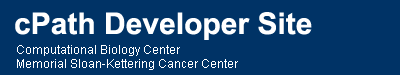
<style>
.page{position:relative;width:400px;height:75px;background:#003366}
.page>*{position:absolute;margin:0}
.t1{font:30px "Arial-BoldMT";color:#ffffff}
.t2{font:12px "ArialMT";color:#ffffff}
</style>
<div class="page">
<p class="t1" style="left:15px;top:12px;width:297px;height:28px">cPath Developer Site</p>
<p class="t2" style="left:17px;top:45px;width:221px;height:25px">Computational Biology Center<br>Memorial Sloan-Kettering Cancer Center</p>
</div>
